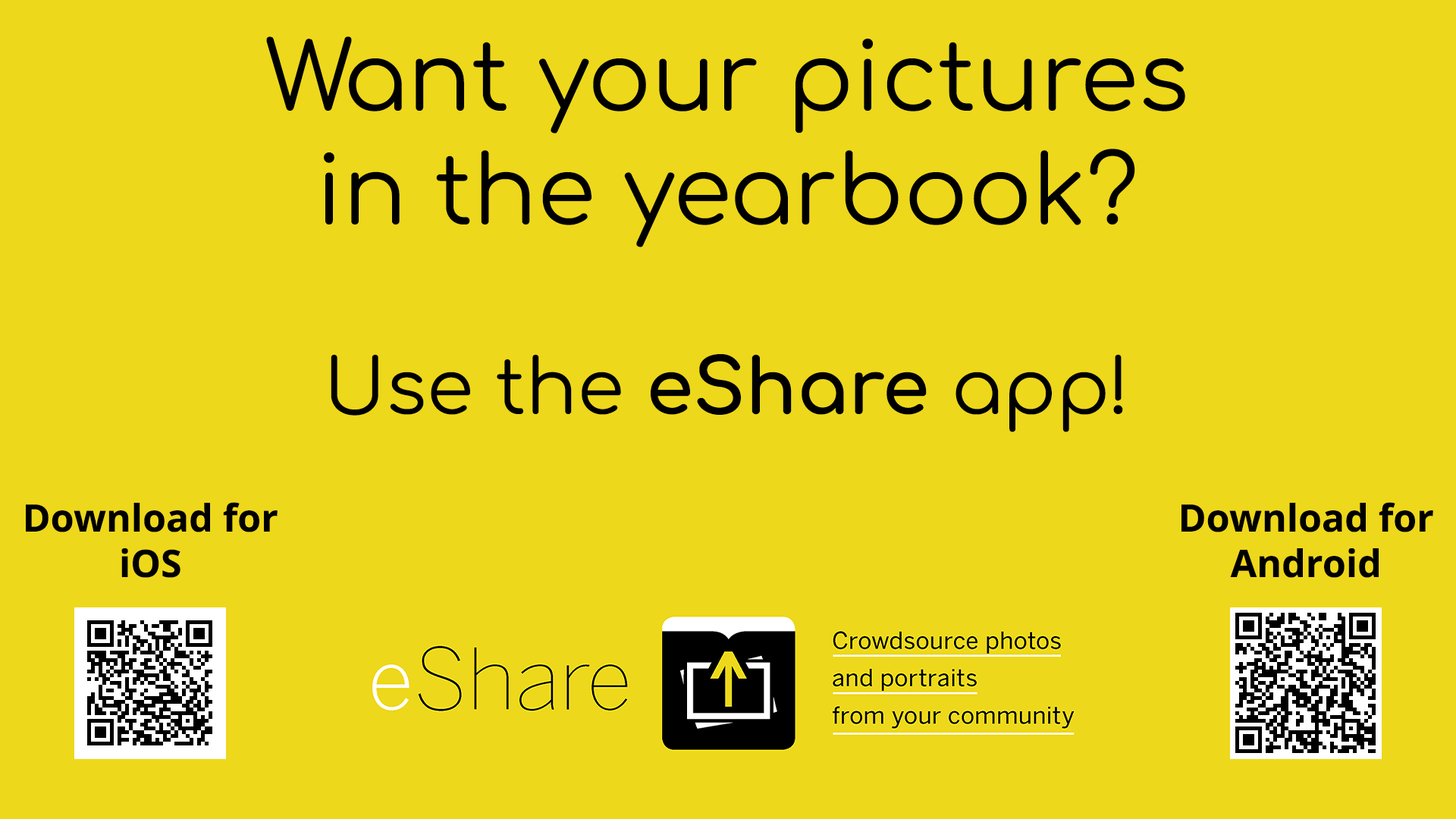
<style>
.page{position:relative;width:1456px;height:819px;background:#eed81b}
.page>*{position:absolute;margin:0}
.t1{font:94.8px "Comfortaa-Regular";color:#000000}
.t2{font:75.8px/189.6px "Comfortaa-Regular";color:#000000}
.t3{font:75.8px/189.6px "Comfortaa-Bold";color:#000000}
.t4{font:37.9px "NotoSans-Bold";color:#000000}
</style>
<div class="page">
<p class="t1" style="left:266px;top:36px;width:919px;height:396px;text-align:center">Want your pictures<br>in the yearbook?<br><span class="t2">Use the </span><span class="t3">eShare</span><span class="t2"> app!</span></p>
<p class="t4" style="left:26px;top:502px;width:252px;height:76px;text-align:center">Download for<br>iOS</p>
<p class="t4" style="left:1181px;top:502px;width:252px;height:76px;text-align:center">Download for<br>Android</p>
</div>
